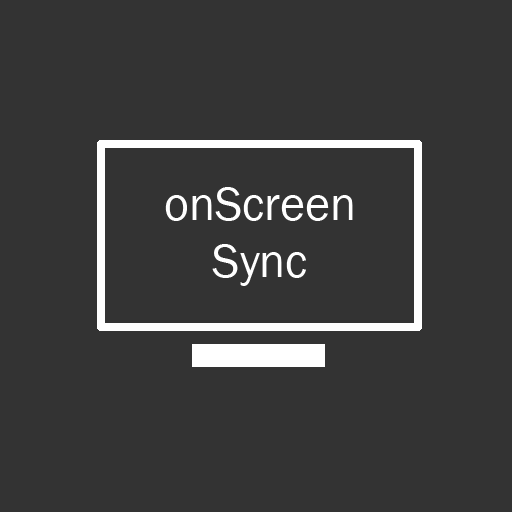
<style>
.page{position:relative;width:512px;height:512px;background:#333333}
.page>*{position:absolute;margin:0}
.t1{font:48px "FranklinGothic-Book";color:#ffffff}
</style>
<div class="page">
<p class="t1" style="left:165px;top:187px;width:188px;height:99px;text-align:center">onScreen<br>Sync</p>
</div>
